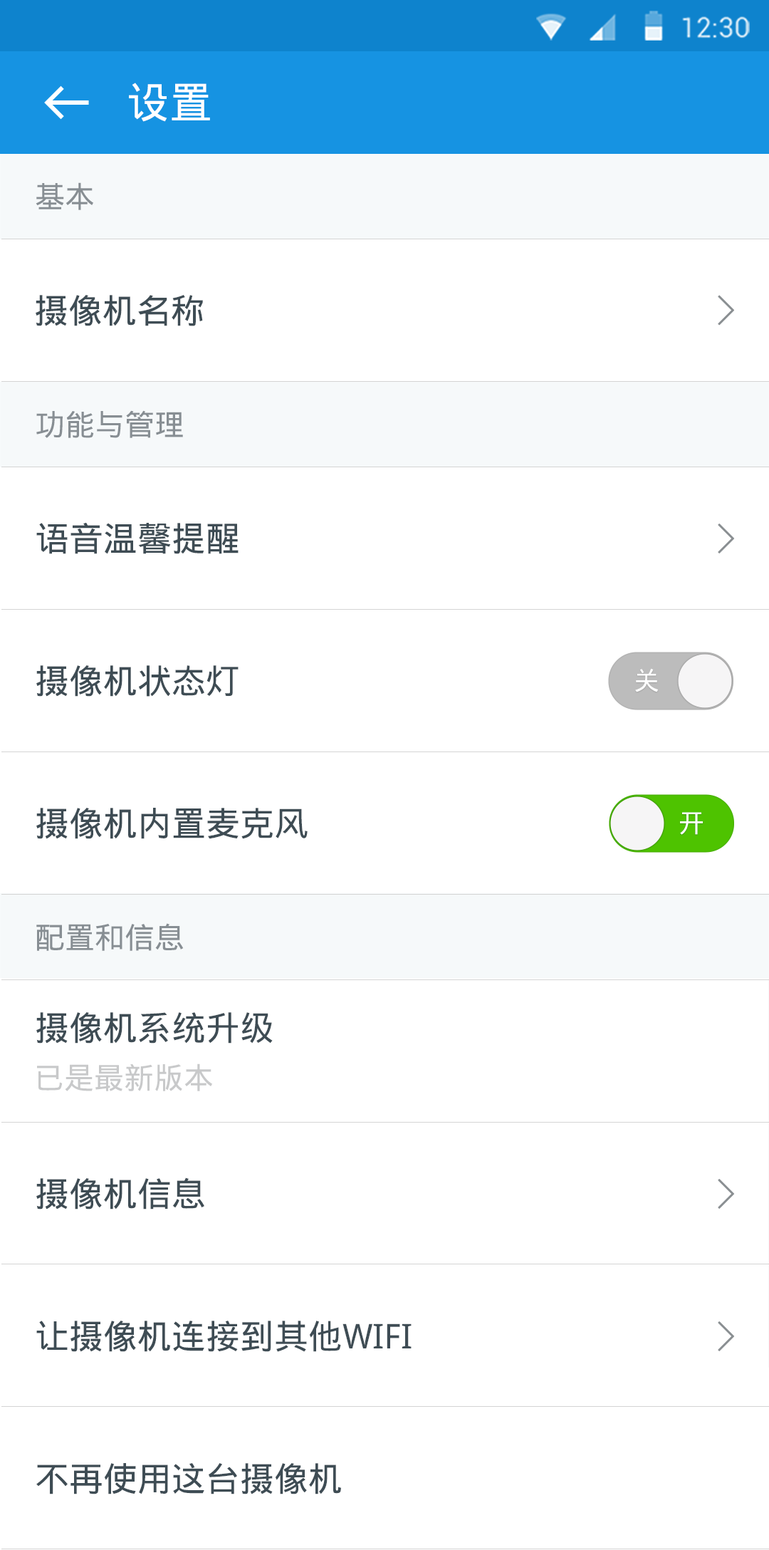
<style>
.page{position:relative;width:769px;height:1550px;background:#ffffff}
.page>*{position:absolute;margin:0}
.t1{font:42.7px "DroidSansFallback";color:#ffffff}
.t2{font:29.9px "DroidSansFallback";color:#878e93}
.t3{font:34.2px "DroidSansFallback";color:#3e4c54}
.t4{font:25.6px "DroidSansFallback";color:#ffffff}
.t5{font:29.9px "DroidSansFallback";color:#c8c9ca}
</style>
<div class="page">
<p class="t1" style="left:129px;top:83px;width:81px;height:39px">设置</p>
<p class="t2" style="left:36px;top:182px;width:57px;height:28px">基本</p>
<p class="t3" style="left:36px;top:295px;width:167px;height:31px">摄像机名称</p>
<p class="t2" style="left:36px;top:410px;width:147px;height:28px">功能与管理</p>
<p class="t3" style="left:36px;top:522px;width:203px;height:32px">语音温馨提醒</p>
<p class="t3" style="left:36px;top:665px;width:203px;height:32px">摄像机状态灯</p>
<p class="t4" style="left:635px;top:668px;width:24px;height:24px">关</p>
<p class="t3" style="left:36px;top:808px;width:272px;height:31px">摄像机内置麦克风</p>
<p class="t4" style="left:680px;top:812px;width:23px;height:23px">开</p>
<p class="t2" style="left:36px;top:923px;width:148px;height:28px">配置和信息</p>
<p class="t3" style="left:36px;top:1012px;width:237px;height:32px">摄像机系统升级</p>
<p class="t5" style="left:37px;top:1063px;width:175px;height:28px">已是最新版本</p>
<p class="t3" style="left:36px;top:1177px;width:168px;height:33px">摄像机信息</p>
<p class="t3" style="left:36px;top:1321px;width:376px;height:31px">让摄像机连接到其他WIFI</p>
<p class="t3" style="left:36px;top:1463px;width:305px;height:31px">不再使用这台摄像机</p>
</div>
